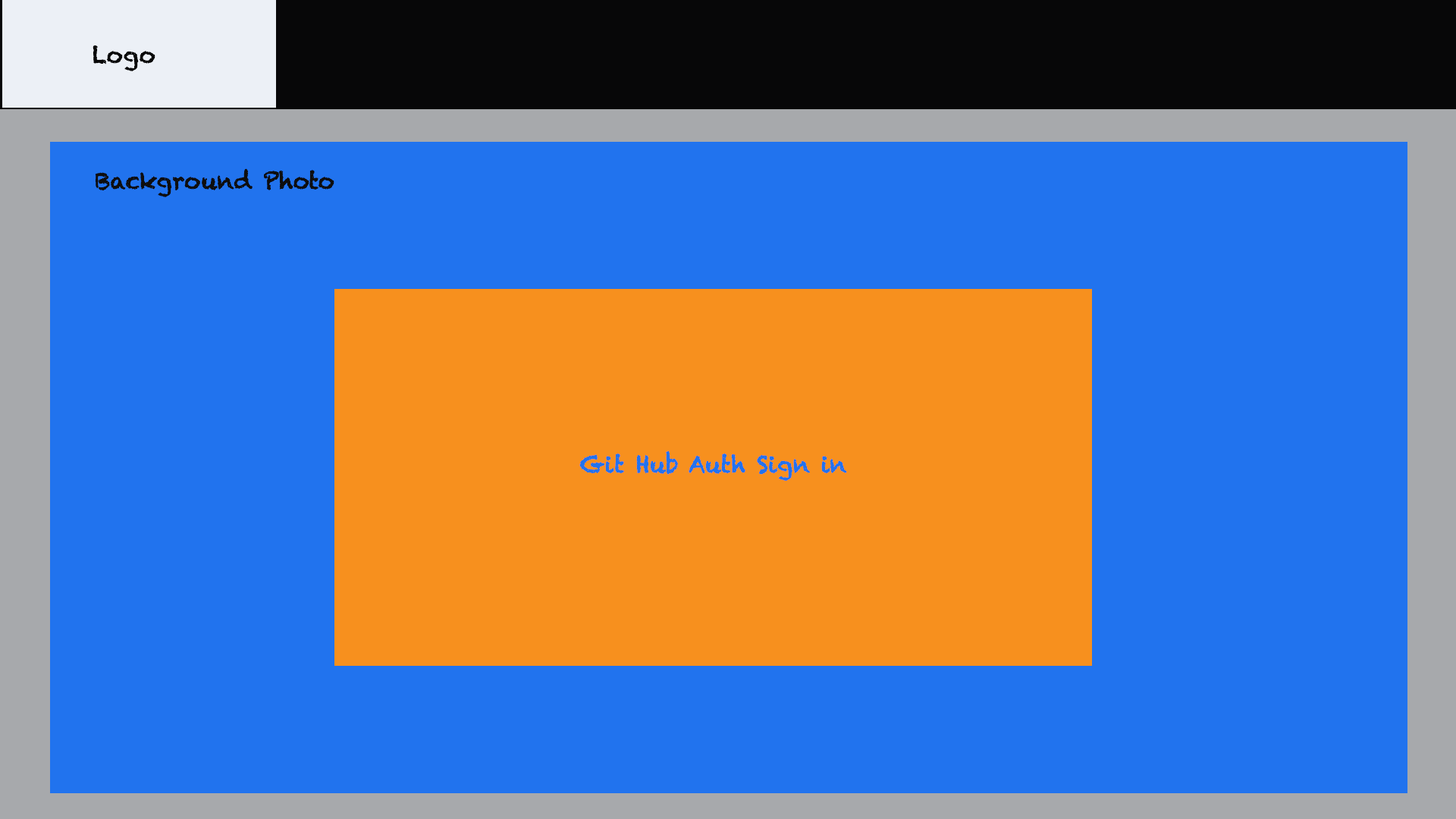
<style>
.page{position:relative;width:1456px;height:819px;background:#2173ee}
.page>*{position:absolute;margin:0}
.t1{font:22.7px "Chalkduster";color:#090909}
.t2{font:22.7px "Chalkduster";color:#0e0e0e}
.t3{font:22.7px "Chalkduster";color:#2173ee}
</style>
<div class="page">
<p class="t1" style="left:93px;top:45px;width:62px;height:26px">Logo</p>
<p class="t2" style="left:95px;top:168px;width:239px;height:29px">Background Photo</p>
<p class="t3" style="left:579px;top:450px;width:268px;height:31px">Git Hub Auth Sign in</p>
</div>
